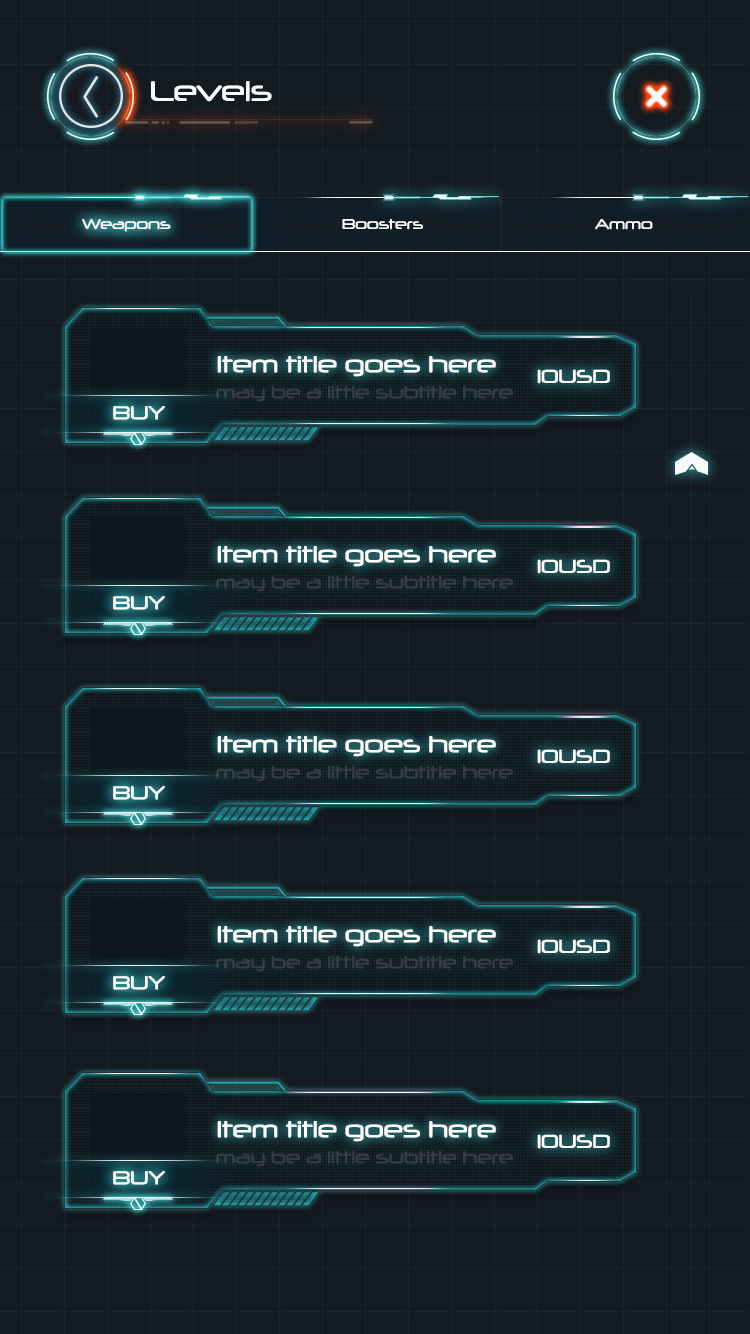
<style>
.page{position:relative;width:750px;height:1334px;background:#131a20}
.page>*{position:absolute;margin:0}
.t1{font:27.2px "Neuropol-Regular";color:#fafdff}
.t2{font:13.6px "Neuropol-Regular";color:#fbfbfb}
.t3{font:22.4px "Neuropol-Regular";color:#ffffff}
.t4{font:18.1px "Neuropol-Regular";color:#ffffff}
.t5{font:16.8px "Neuropol-Regular";color:#343a3e}
</style>
<div class="page">
<p class="t1" style="left:151px;top:81px;width:121px;height:21px">Levels</p>
<p class="t2" style="left:82px;top:219px;width:89px;height:13px">Weapons</p>
<p class="t2" style="left:342px;top:219px;width:81px;height:11px">Boosters</p>
<p class="t2" style="left:595px;top:219px;width:58px;height:11px">Ammo</p>
<p class="t3" style="left:217px;top:356px;width:279px;height:21px">Item title goes here</p>
<p class="t4" style="left:537px;top:369px;width:73px;height:15px">10USD</p>
<p class="t5" style="left:216px;top:386px;width:297px;height:16px">may be a little subtitle here</p>
<p class="t4" style="left:113px;top:406px;width:52px;height:14px">BUY</p>
<p class="t3" style="left:217px;top:546px;width:279px;height:21px">Item title goes here</p>
<p class="t4" style="left:537px;top:559px;width:73px;height:15px">10USD</p>
<p class="t5" style="left:216px;top:576px;width:297px;height:16px">may be a little subtitle here</p>
<p class="t4" style="left:113px;top:596px;width:52px;height:14px">BUY</p>
<p class="t3" style="left:217px;top:736px;width:279px;height:21px">Item title goes here</p>
<p class="t4" style="left:537px;top:749px;width:73px;height:15px">10USD</p>
<p class="t5" style="left:216px;top:766px;width:297px;height:16px">may be a little subtitle here</p>
<p class="t4" style="left:113px;top:786px;width:52px;height:14px">BUY</p>
<p class="t3" style="left:217px;top:926px;width:279px;height:21px">Item title goes here</p>
<p class="t4" style="left:537px;top:939px;width:73px;height:15px">10USD</p>
<p class="t5" style="left:216px;top:956px;width:297px;height:16px">may be a little subtitle here</p>
<p class="t4" style="left:113px;top:976px;width:52px;height:14px">BUY</p>
<p class="t3" style="left:217px;top:1121px;width:279px;height:21px">Item title goes here</p>
<p class="t4" style="left:537px;top:1134px;width:73px;height:15px">10USD</p>
<p class="t5" style="left:216px;top:1151px;width:297px;height:16px">may be a little subtitle here</p>
<p class="t4" style="left:113px;top:1171px;width:52px;height:14px">BUY</p>
</div>
